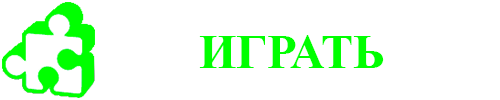
<style>
.page{position:relative;width:500px;height:100px;background:#ffffff}
.page>*{position:absolute;margin:0}
.t1{font:48px "TimesNewRomanPS-BoldMT";color:#00ff00}
</style>
<div class="page">
<p class="t1" style="left:199px;top:35px;width:185px;height:33px">ИГРАТЬ</p>
</div>
